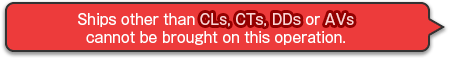
<style>
.page{position:relative;width:450px;height:58px;background:#ed3b3b}
.page>*{position:absolute;margin:0}
.t1{font:14px/18px "GothicMB101Pro-Regular";color:#ffffff}
.t2{font:14px/18px "GothicMB101Pro-Regular";color:#ffd3d3}
</style>
<div class="page">
<p class="t1" style="left:78px;top:13px;width:276px;height:32px;text-align:center">Ships other than <span class="t2">CLs, CTs, DDs</span> or <span class="t2">AVs<br></span>cannot be brought on this operation.</p>
<p class="t1" style="left:78px;top:13px;width:276px;height:32px;text-align:center">Ships other than <span class="t2">CLs, CTs, DDs</span> or <span class="t2">AVs<br></span>cannot be brought on this operation.</p>
</div>
